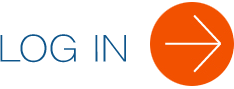
<style>
.page{position:relative;width:234px;height:89px;background:#ffffff}
.page>*{position:absolute;margin:0}
.t1{font:38px "YDIYGO310";letter-spacing:0.016em;color:#0e558b;scale:1.1 1}
</style>
<div class="page">
<p class="t1" style="left:0px;top:34px;width:126px;height:29px">LOG IN</p>
</div>
